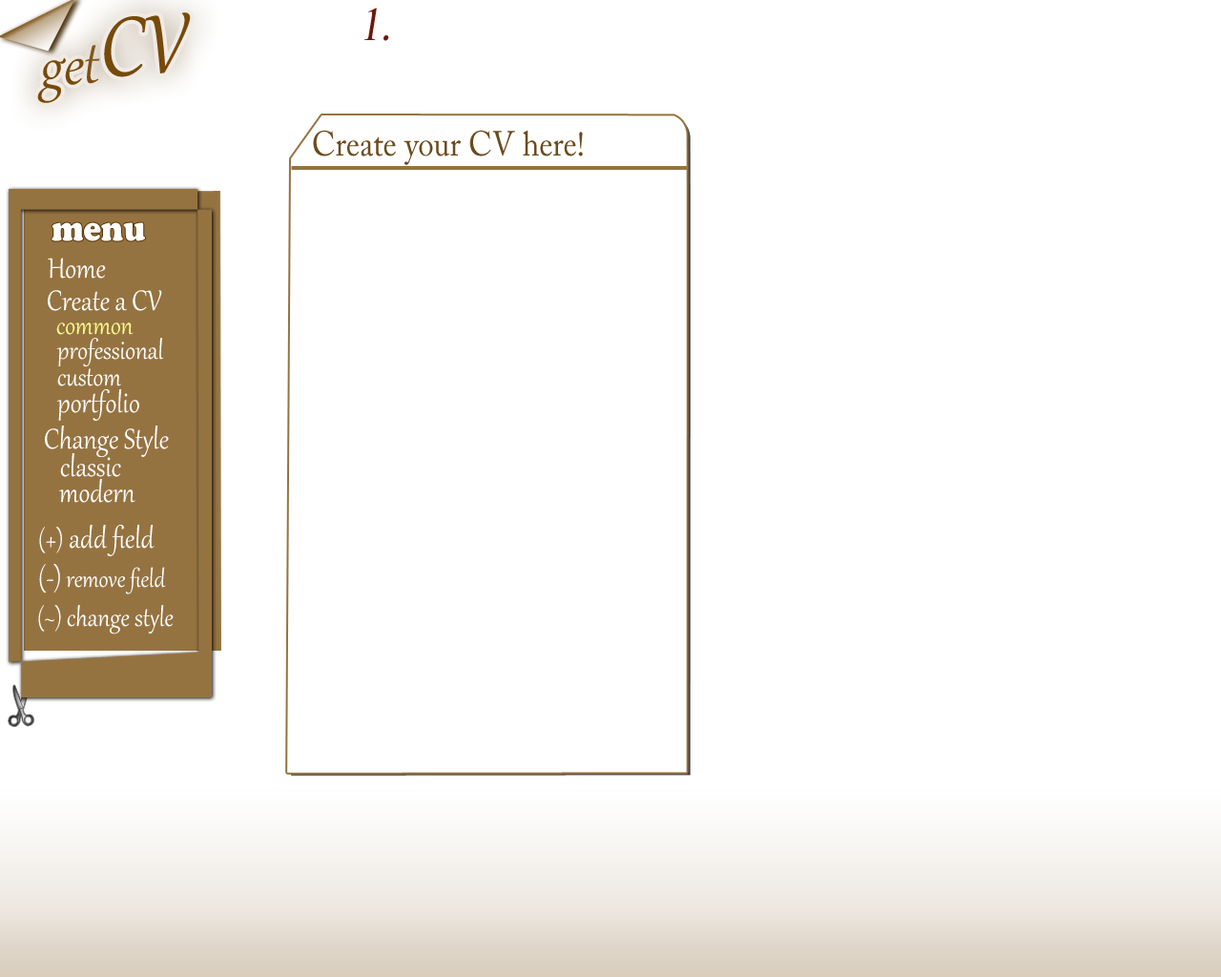
<style>
.page{position:relative;width:1221px;height:977px;background:#ffffff}
.page>*{position:absolute;margin:0}
.t1{font:100.7px "Gabriola";color:#774a0a;font-style:italic;scale:0.91 1}
.t2{font:47.2px "IskoolaPota";color:#6c190b;font-style:italic;scale:0.91 1}
.t3{font:69.2px "Gabriola";color:#774a0a;font-style:italic;scale:0.91 1}
.t4{font:34.6px "ACaslonPro-Regular";color:#6b4b1c;scale:0.91 1}
.t5{font:34.6px "CooperBlackStd";color:#ffffff;scale:0.91 1}
.t6{font:34.6px "Gabriola";color:#ffffff;scale:0.91 1}
.t7{font:31.5px "Gabriola";color:#fbff91;scale:0.91 1}
.t8{font:31.5px "Gabriola";color:#ffffff;scale:0.91 1}
.t9{font:29.4px "Gabriola";color:#ffffff;scale:0.91 1}
</style>
<div class="page">
<p class="t1" style="left:104px;top:12px;width:87px;height:65px;rotate:-4deg">CV</p>
<p class="t2" style="left:364px;top:8px;width:25px;height:33px">1.</p>
<p class="t3" style="left:37px;top:45px;width:63px;height:58px;rotate:-4deg">get</p>
<p class="t4" style="left:313px;top:130px;width:270px;height:35px">Create your CV here!</p>
<p class="t5" style="left:52px;top:222px;width:93px;height:19px">menu</p>
<p class="t6" style="left:48px;top:258px;width:58px;height:21px">Home</p>
<p class="t6" style="left:48px;top:290px;width:114px;height:21px">Create a CV</p>
<p class="t7" style="left:56px;top:322px;width:78px;height:13px">common</p>
<p class="t8" style="left:56px;top:338px;width:108px;height:29px">professional</p>
<p class="t8" style="left:57px;top:368px;width:64px;height:18px">custom</p>
<p class="t6" style="left:56px;top:389px;width:83px;height:32px">portfolio</p>
<p class="t6" style="left:45px;top:425px;width:124px;height:32px">Change Style</p>
<p class="t6" style="left:60px;top:453px;width:61px;height:24px">classic</p>
<p class="t6" style="left:59px;top:479px;width:76px;height:24px">modern</p>
<p class="t6" style="left:39px;top:525px;width:116px;height:31px"><span class="t8">(+)</span> add field</p>
<p class="t9" style="left:39px;top:564px;width:127px;height:30px"><span class="t6">(-)</span> remove field</p>
<p class="t8" style="left:38px;top:605px;width:136px;height:29px">(~) change style</p>
</div>
